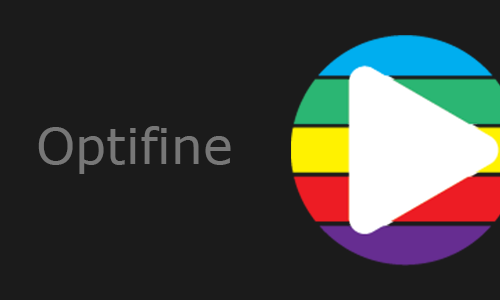
<style>
.page{position:relative;width:500px;height:300px;background:#1b1b1b}
.page>*{position:absolute;margin:0}
.t1{font:50px "Verdana";color:#777777}
</style>
<div class="page">
<p class="t1" style="left:38px;top:126px;width:193px;height:48px">Optifine</p>
</div>
